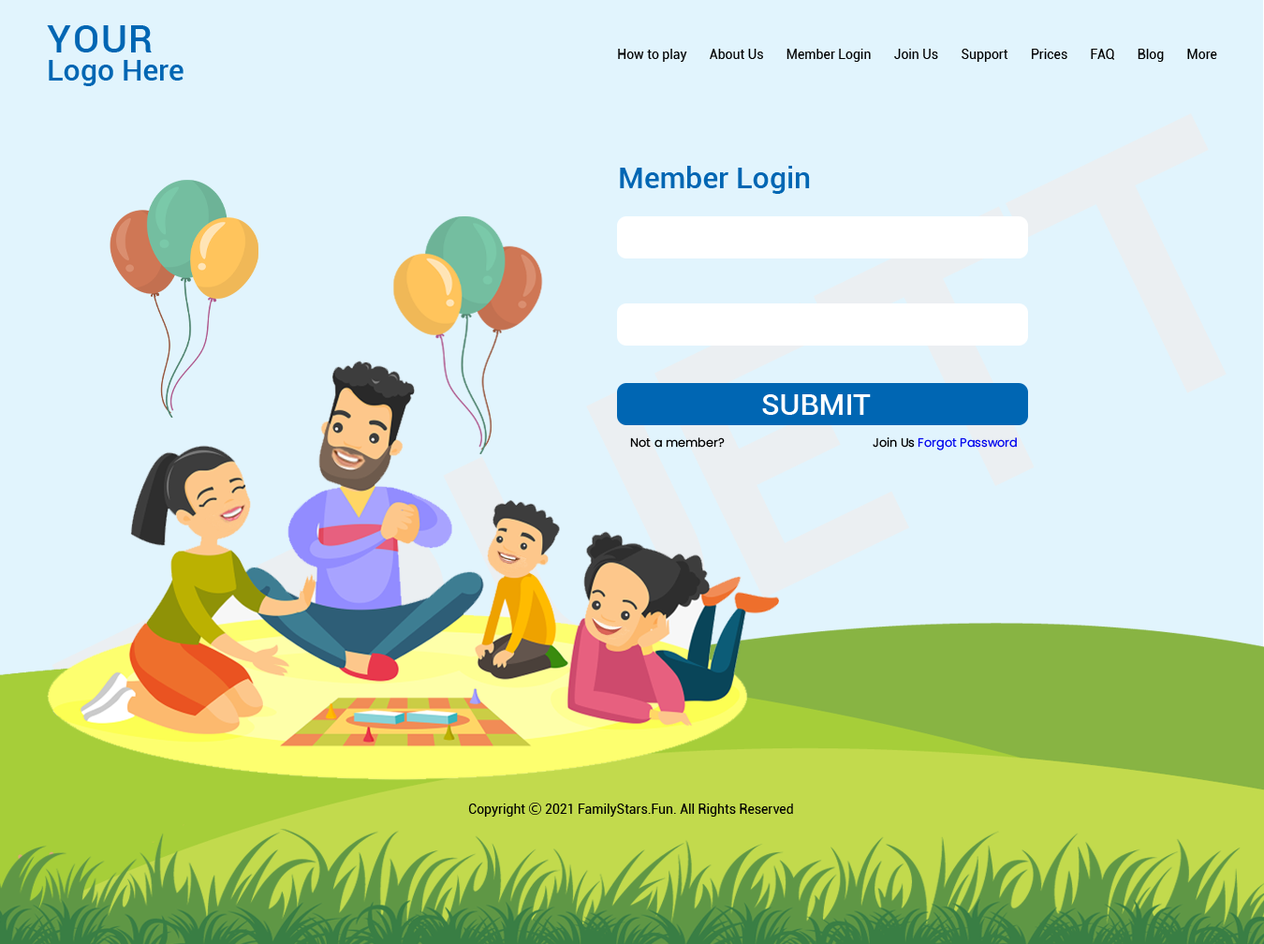
<style>
.page{position:relative;width:1264px;height:944px;background:#e1f4fd}
.page>*{position:absolute;margin:0}
.t1{font:29.8px/28.1px "Roboto-Medium";color:#0066b3}
.t2{font:38.3px/28.1px "Roboto-Medium";letter-spacing:0.05em;color:#0066b3}
.t3{font:13.1px "Roboto-Regular";color:#000000}
.t4{font:29.8px "Roboto-Medium";color:#0066b3}
.t5{font:29.8px "Roboto-Medium";color:#ffffff}
.t6{font:12.1px "Poppins-Regular";color:#000000}
.t7{font:12.1px "Poppins-Regular";color:#0005ee}
.t8{font:13.1px "KozGoPr6N-Regular";color:#000000}
</style>
<div class="page">
<p class="t1" style="left:47px;top:25px;width:136px;height:61px"><span class="t2">YOUR <br></span>Logo Here</p>
<p class="t3" style="left:618px;top:49px;width:599px;height:13px">How to play       About Us       Member Login       Join Us       Support       Prices       FAQ       Blog       More</p>
<p class="t4" style="left:620px;top:166px;width:190px;height:28px">Member Login</p>
<p class="t5" style="left:762px;top:394px;width:109px;height:21px">SUBMIT</p>
<p class="t6" style="left:630px;top:437px;width:387px;height:13px">Not a member?                                              Join Us<span class="t7"> Forgot Password</span></p>
<p class="t3" style="left:468px;top:802px;width:325px;height:14px">Copyright <span class="t8">Ⓒ</span> 2021 FamilyStars.Fun. All Rights Reserved</p>
</div>
